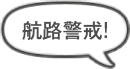
<style>
.page{position:relative;width:130px;height:69px;background:#ffffff}
.page>*{position:absolute;margin:0}
.t1{font:20px "GothicMB101Pr6N-Medium";color:#4c4c4c}
</style>
<div class="page">
<p class="t1" style="left:22px;top:20px;width:85px;height:21px">航路警戒!</p>
</div>
